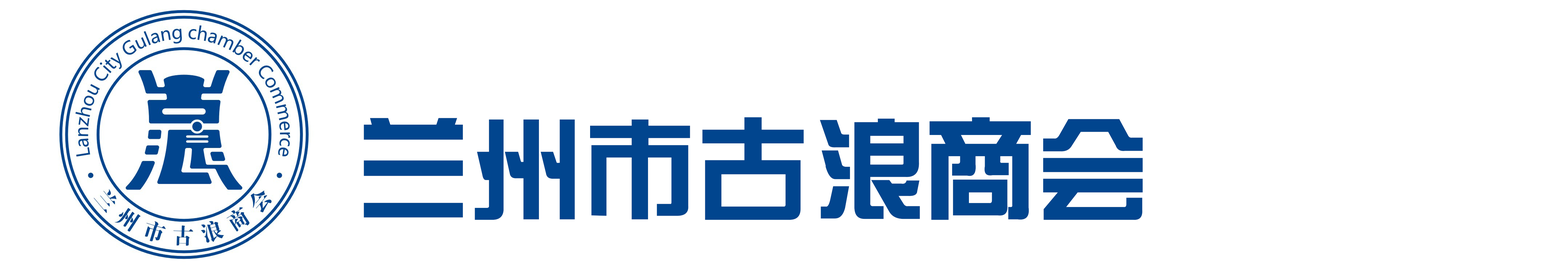
<style>
.page{position:relative;width:1568px;height:268px;background:#ffffff}
.page>*{position:absolute;margin:0}
.t1{font:113.1px "FZZYJW--GB1-0";color:#01458e}
</style>
<div class="page">
<p class="t1" style="left:364px;top:117px;width:779px;height:103px">兰州市古浪商会</p>
</div>
